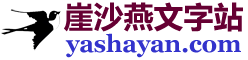
<style>
.page{position:relative;width:248px;height:60px;background:#ffffff}
.page>*{position:absolute;margin:0}
.t1{font:30px "MicrosoftYaHei-Bold";color:#660033}
.t2{font:24px "Georgia-Bold";color:#3333cc}
</style>
<div class="page">
<p class="t1" style="left:64px;top:2px;width:179px;height:30px">崖沙燕文字站</p>
<p class="t2" style="left:65px;top:33px;width:176px;height:25px">yashayan.com</p>
</div>
